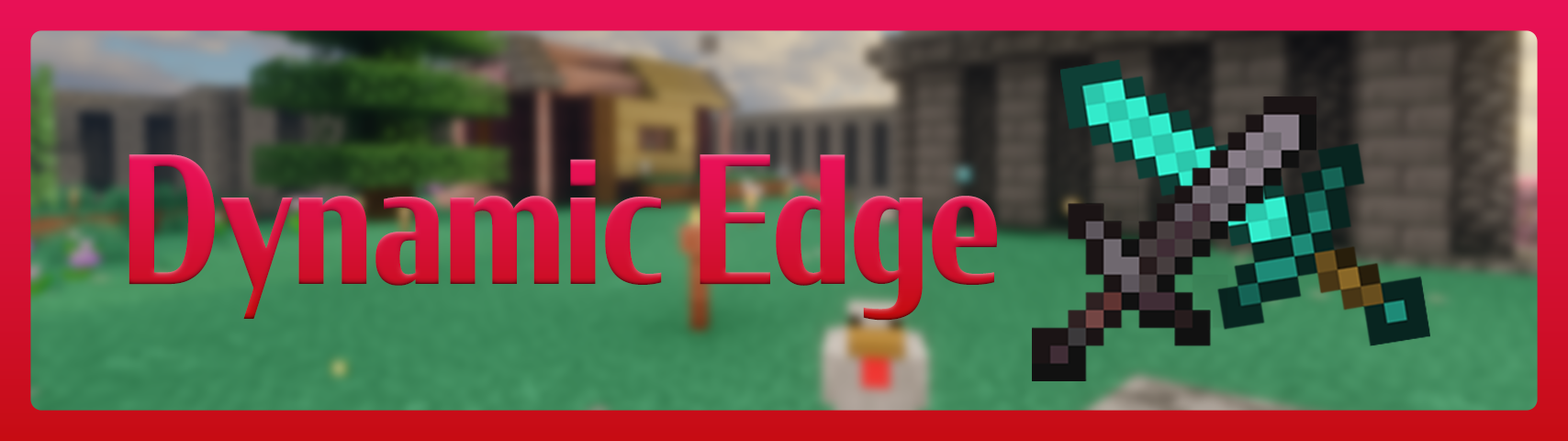
<style>
.page{position:relative;width:1568px;height:441px}
.page>*{position:absolute;margin:0}
.t1{font:174.8px "Condor-Bold";color:#d6103b;scale:0.73 1}
</style>
<div class="page">
<p class="t1" style="left:129px;top:154px;width:868px;height:166px">Dynamic Edge</p>
</div>
